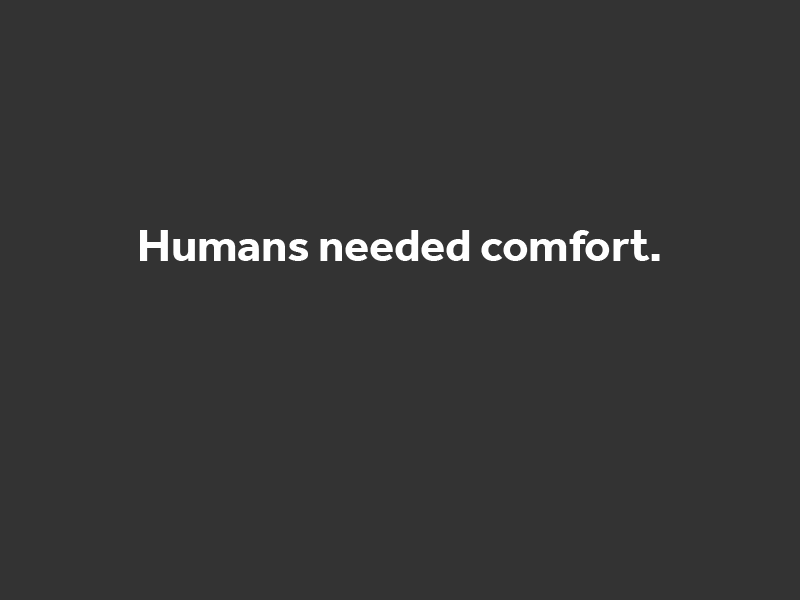
<style>
.page{position:relative;width:800px;height:600px;background:#333333}
.page>*{position:absolute;margin:0}
.t1{font:46.5px "Effra-Bold";color:#ffffff}
</style>
<div class="page">
<p class="t1" style="left:140px;top:230px;width:520px;height:31px">Humans needed comfort.</p>
</div>
